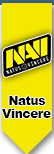
<style>
.page{position:relative;width:54px;height:154px;background:#f4e800}
.page>*{position:absolute;margin:0}
.t1{font:11.7px "Arial-Black";letter-spacing:-0.01em;color:#000000}
</style>
<div class="page">
<p class="t1" style="left:9px;top:96px;width:37px;height:9px">Natus</p>
<p class="t1" style="left:2px;top:109px;width:49px;height:9px">Vincere</p>
</div>
